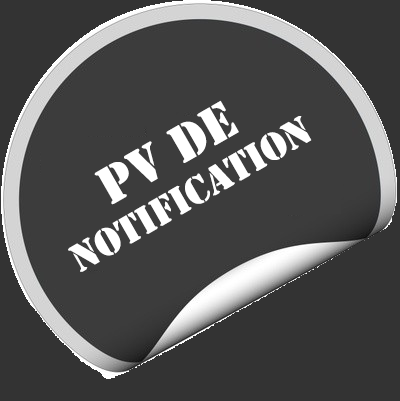
<style>
.page{position:relative;width:400px;height:401px;background:#3c3c3c}
.page>*{position:absolute;margin:0}
.t1{font:36px "StencilStd";color:#ffffff}
.t2{font:48px "StencilStd";color:#ffffff}
</style>
<div class="page">
<p class="t1" style="left:68px;top:100px;width:244px;height:172px;text-align:center;rotate:-30deg"><span class="t2">pv de<br></span>notification</p>
</div>
